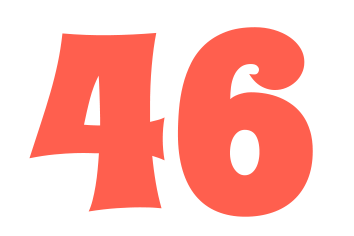
<style>
.page{position:relative;width:354px;height:236px;background:#ffffff}
.page>*{position:absolute;margin:0}
.t1{font:250px "SpicyRice-Regular";color:#ff5f4e}
</style>
<div class="page">
<p class="t1" style="left:29px;top:27px;width:284px;height:190px">46</p>
</div>
